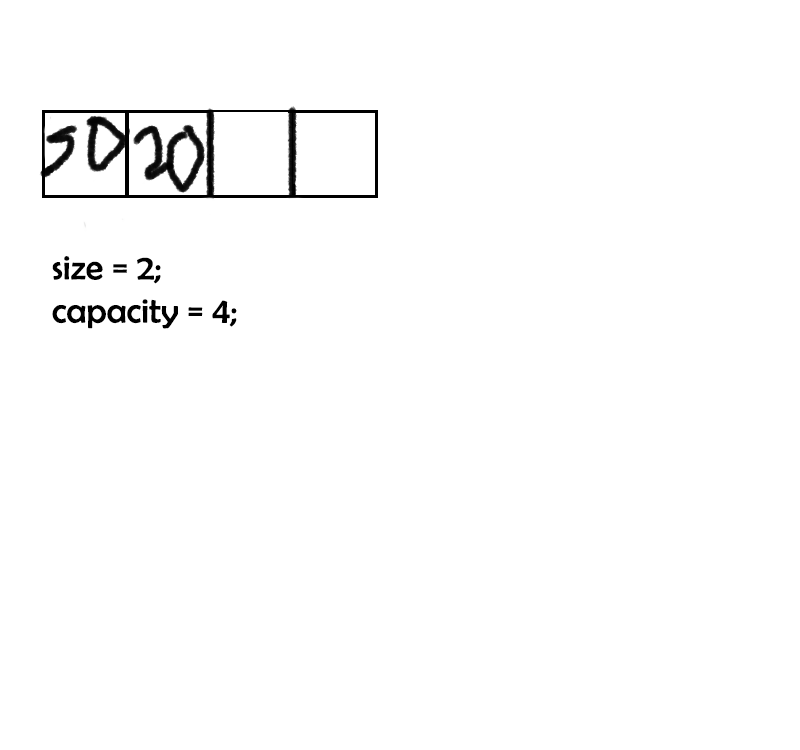
<style>
.page{position:relative;width:800px;height:750px;background:#ffffff}
.page>*{position:absolute;margin:0}
.t1{font:36px "BerlinSansFB-Reg";color:#000000}
</style>
<div class="page">
<p class="t1" style="left:52px;top:256px;width:185px;height:73px">size = 2;<br>capacity = 4;</p>
</div>
